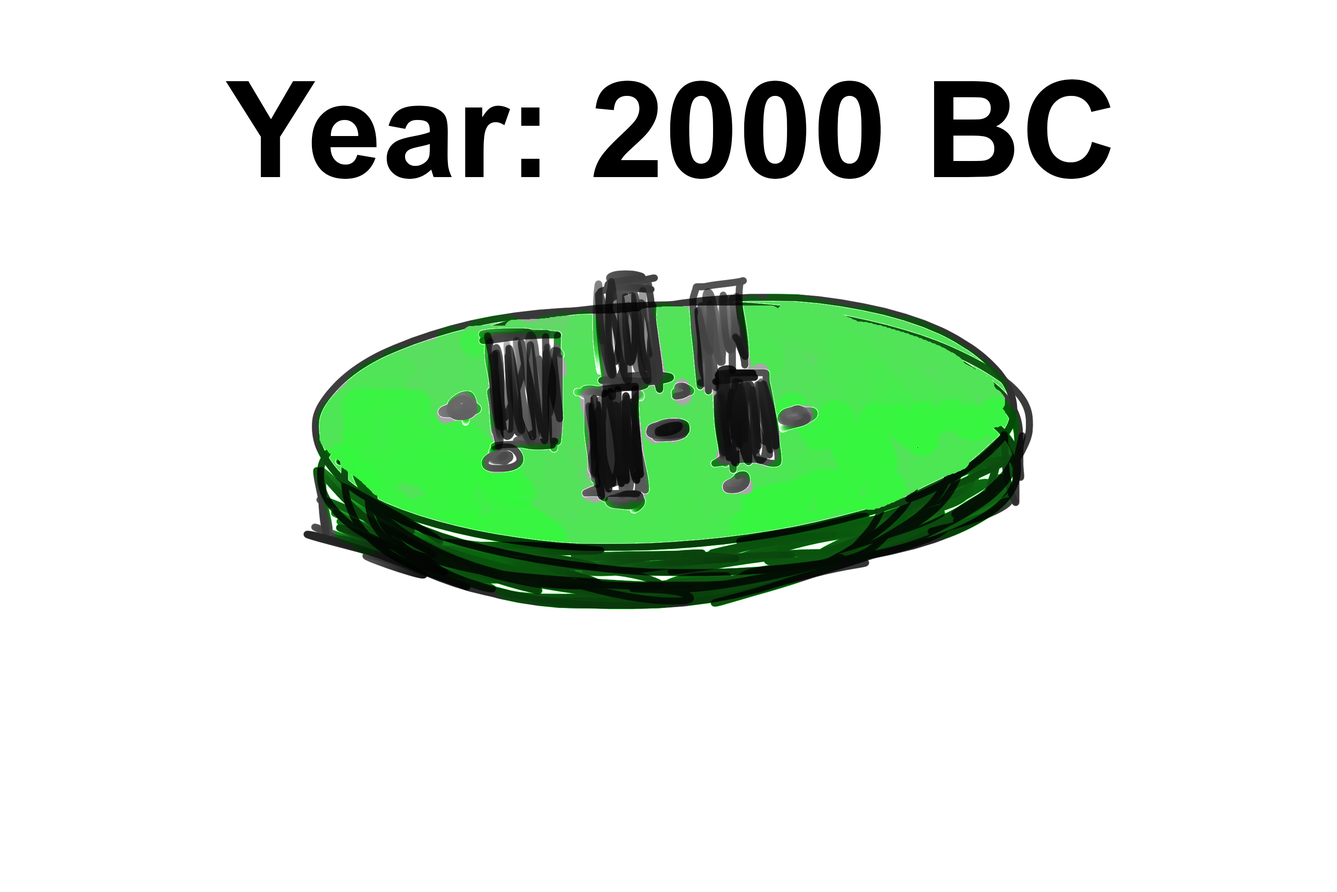
<style>
.page{position:relative;width:1337px;height:892px;background:#ffffff}
.page>*{position:absolute;margin:0}
.t1{font:133.7px "Arial-BoldMT";color:#000000}
</style>
<div class="page">
<p class="t1" style="left:226px;top:79px;width:885px;height:100px">Year: 2000 BC</p>
</div>
